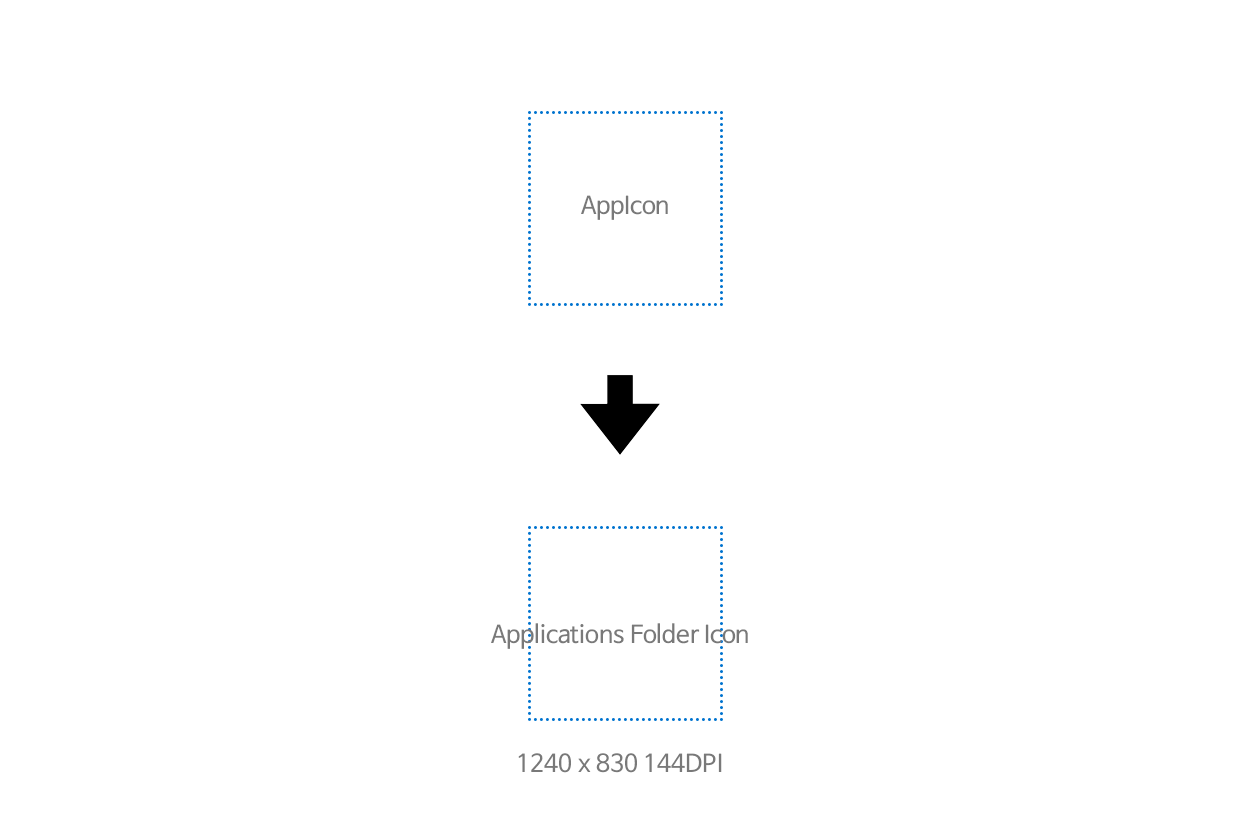
<style>
.page{position:relative;width:1240px;height:830px;background:#ffffff}
.page>*{position:absolute;margin:0}
.t1{font:24px "NanumBarunGothicOTF-YetHangul";color:#797979}
</style>
<div class="page">
<p class="t1" style="left:581px;top:195px;width:87px;height:25px">AppIcon</p>
<p class="t1" style="left:491px;top:623px;width:257px;height:26px">Applications Folder Icon</p>
<p class="t1" style="left:518px;top:753px;width:204px;height:20px">1240 x 830 144DPI</p>
</div>
